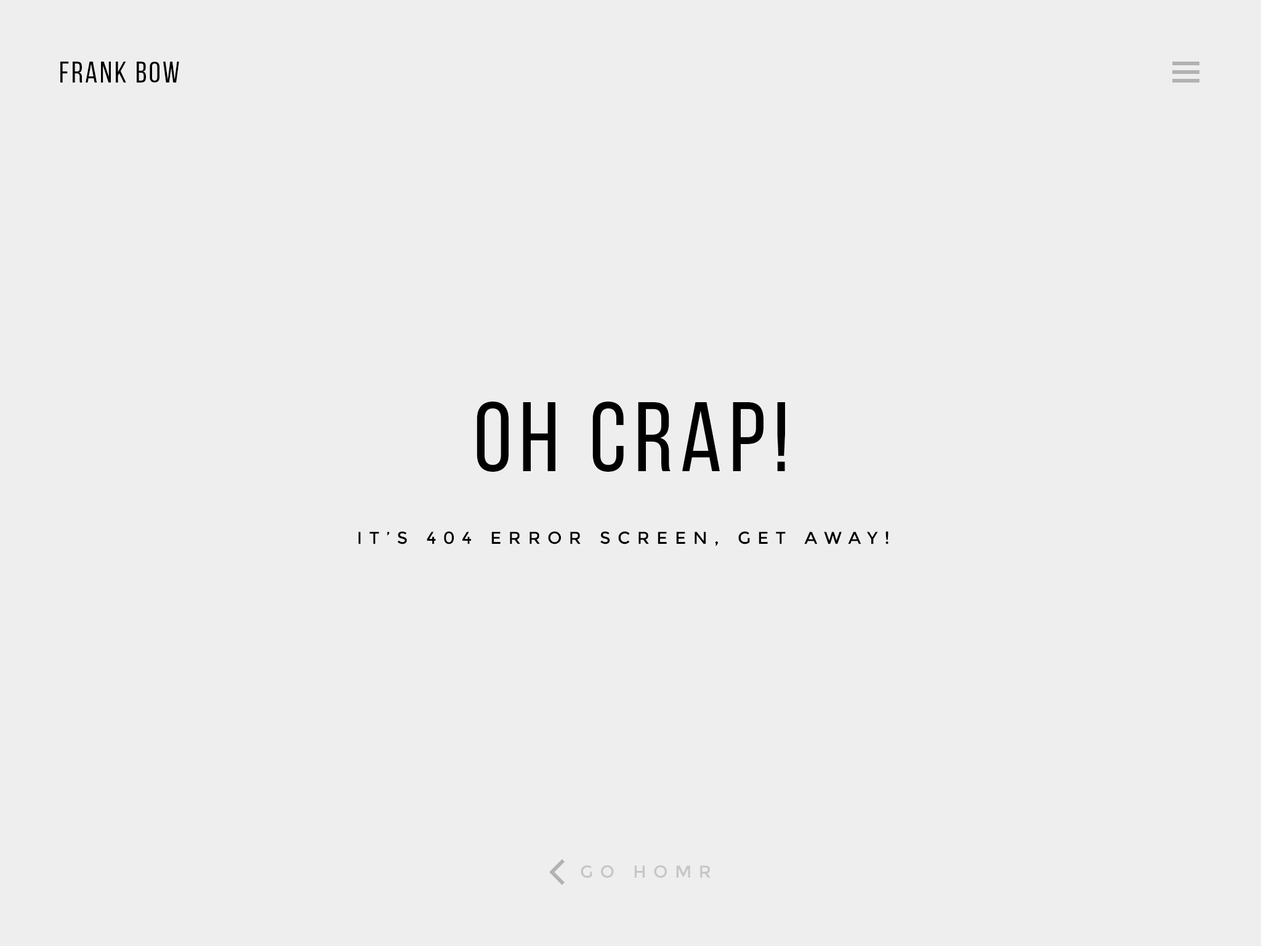
<style>
.page{position:relative;width:1261px;height:946px;background:#eeeeee}
.page>*{position:absolute;margin:0}
.t1{font:29.6px "BebasNeueRegular";letter-spacing:0.075em;color:#000000;text-transform:uppercase}
.t2{font:98.5px "BebasNeueRegular";letter-spacing:0.075em;color:#000000}
.t3{font:17.2px "Montserrat-Regular";letter-spacing:0.4em;color:#000000;text-transform:uppercase}
.t4{font:17.2px "Montserrat-Regular";letter-spacing:0.4em;color:#c6c6c6;text-transform:uppercase}
</style>
<div class="page">
<p class="t1" style="left:60px;top:62px;width:119px;height:21px">FRANK BOW</p>
<p class="t2" style="left:477px;top:401px;width:308px;height:71px">OH CRAP!</p>
<p class="t3" style="left:358px;top:531px;width:530px;height:14px">IT’S 404 ERROR SCREEN, GET AWAY!</p>
<p class="t4" style="left:581px;top:865px;width:129px;height:13px">GO HOMR</p>
</div>
